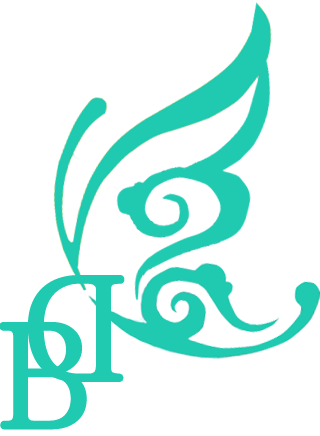
<style>
.page{position:relative;width:320px;height:436px;background:#ffffff}
.page>*{position:absolute;margin:0}
.t1{font:143.8px "By-JOSSQ-DMF-in-BeiJing";letter-spacing:-0.06em;color:#1fcab0;font-weight:bold}
</style>
<div class="page">
<p class="t1" style="left:28px;top:275px;width:97px;height:107px;rotate:180deg">D</p>
<p class="t1" style="left:0px;top:322px;width:87px;height:108px">B</p>
</div>
